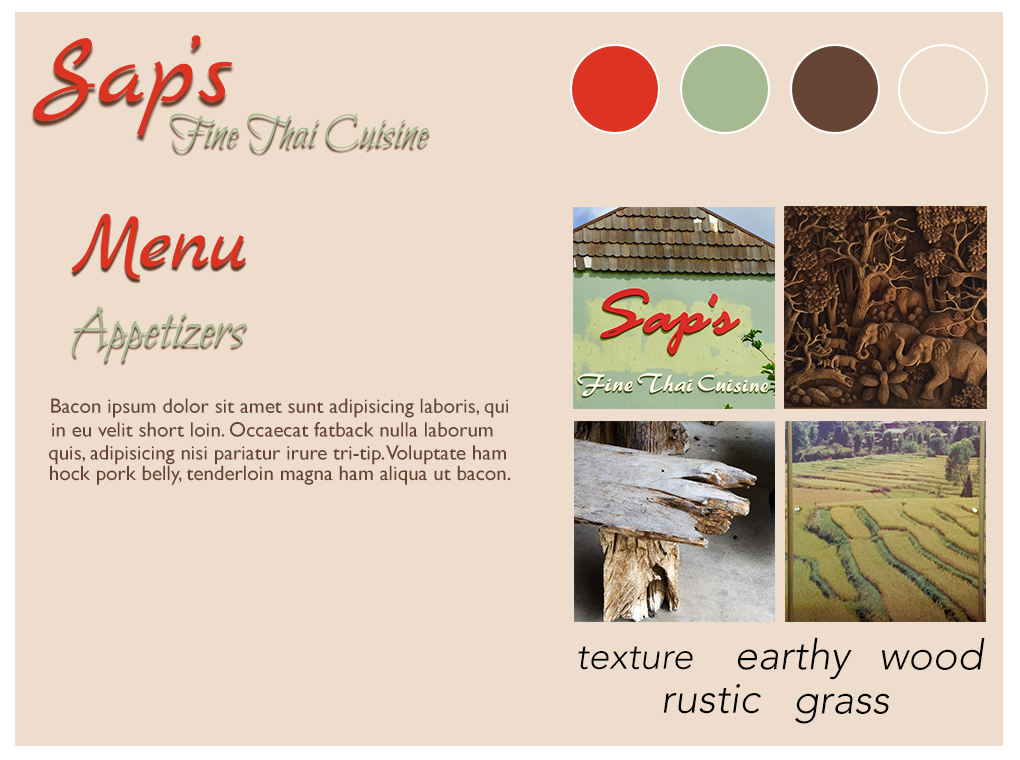
<style>
.page{position:relative;width:1020px;height:760px;background:#eeddcc}
.page>*{position:absolute;margin:0}
.t1{font:100px "MarckScript-Regular";color:#dd3322}
.t2{font:45.8px "BilboSwashCaps-Regular";color:#a6ba91}
.t3{font:83.3px "MarckScript-Regular";color:#dd3322}
.t4{font:58.3px "BilboSwashCaps-Regular";color:#a6ba91}
.t5{font:20.8px "GillSans";color:#664433}
.t6{font:41.7px "Avenir-LightOblique";color:#000000}
.t7{font:37.5px "Avenir-LightOblique";color:#000000}
</style>
<div class="page">
<p class="t1" style="left:33px;top:35px;width:200px;height:101px">Sap’s</p>
<p class="t2" style="left:170px;top:113px;width:259px;height:39px">Fine Thai Cuisine</p>
<p class="t3" style="left:71px;top:213px;width:175px;height:66px">Menu</p>
<p class="t4" style="left:72px;top:306px;width:175px;height:56px">Appetizers</p>
<p class="t5" style="left:51px;top:398px;width:457px;height:20px">Bacon ipsum dolor sit amet sunt adipisicing laboris, qui</p>
<p class="t5" style="left:52px;top:422px;width:441px;height:15px">in eu velit short loin. Occaecat fatback nulla laborum</p>
<p class="t5" style="left:49px;top:445px;width:457px;height:20px">quis, adipisicing nisi pariatur irure tri-tip. Voluptate ham</p>
<p class="t5" style="left:50px;top:465px;width:461px;height:20px">hock pork belly, tenderloin magna ham aliqua ut bacon.</p>
<p class="t6" style="left:737px;top:637px;width:115px;height:43px">earthy</p>
<p class="t6" style="left:881px;top:638px;width:104px;height:32px">wood</p>
<p class="t7" style="left:578px;top:646px;width:115px;height:24px">texture</p>
<p class="t6" style="left:663px;top:684px;width:99px;height:30px">rustic</p>
<p class="t6" style="left:795px;top:693px;width:95px;height:31px">grass</p>
</div>
